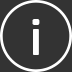
<style>
.page{position:relative;width:72px;height:72px;background:#333333}
.page>*{position:absolute;margin:0}
.t1{font:54px "Calibri";color:#ffffff;font-weight:bold}
</style>
<div class="page">
<p class="t1" style="left:32px;top:19px;width:8px;height:36px">i</p>
</div>
